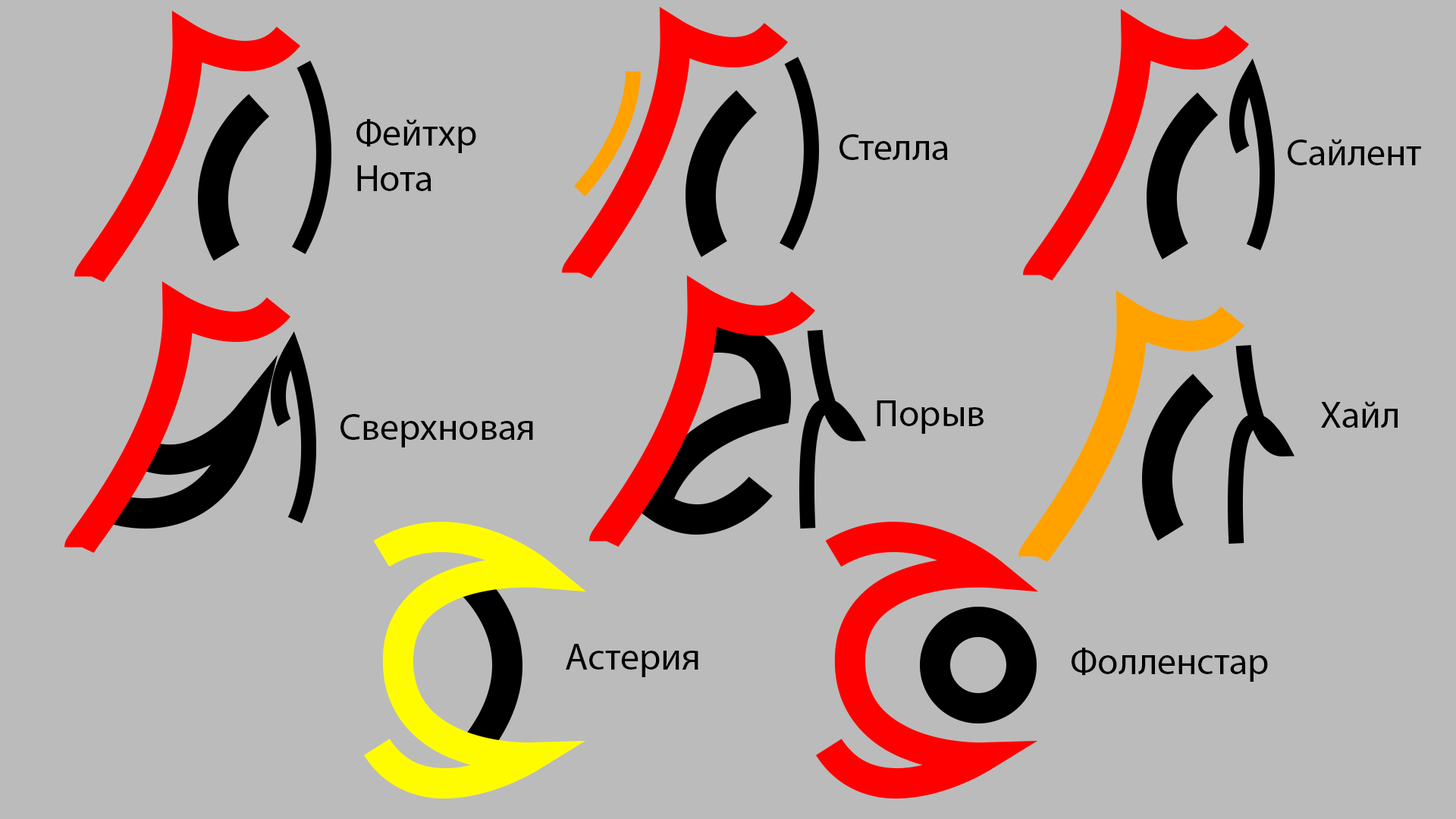
<style>
.page{position:relative;width:1456px;height:819px;background:#bbbbbb}
.page>*{position:absolute;margin:0}
.t1{font:37.9px "MyriadPro-Regular";color:#000000}
</style>
<div class="page">
<p class="t1" style="left:356px;top:119px;width:120px;height:72px">Фейтхр<br>Нота</p>
<p class="t1" style="left:839px;top:134px;width:109px;height:26px">Стелла</p>
<p class="t1" style="left:1288px;top:139px;width:133px;height:26px">Сайлент</p>
<p class="t1" style="left:877px;top:400px;width:107px;height:34px">Порыв</p>
<p class="t1" style="left:1321px;top:401px;width:77px;height:27px">Хайл</p>
<p class="t1" style="left:340px;top:414px;width:193px;height:33px">Сверхновая</p>
<p class="t1" style="left:566px;top:644px;width:132px;height:33px">Астерия</p>
<p class="t1" style="left:1072px;top:648px;width:196px;height:34px">Фолленстар</p>
</div>
